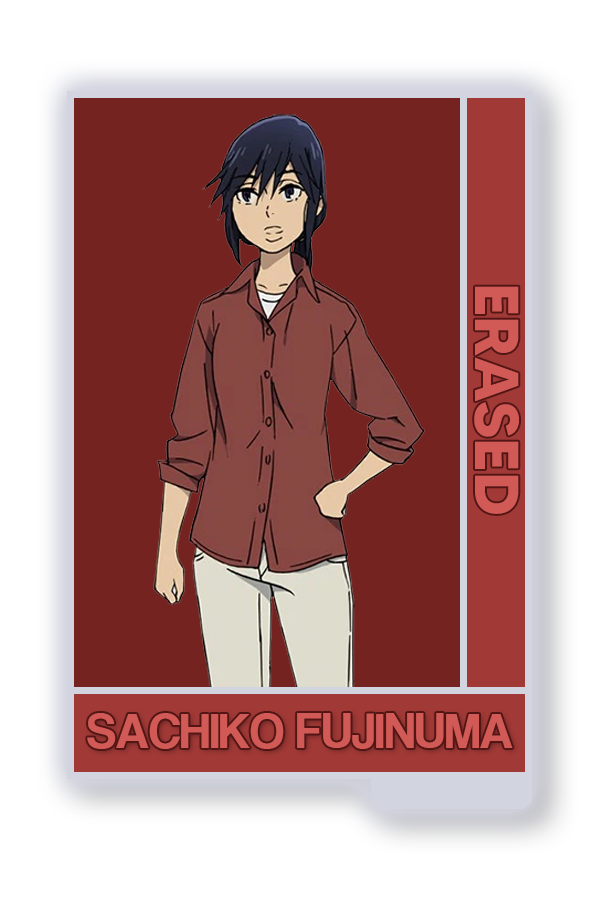
<style>
.page{position:relative;width:600px;height:900px;background:#742320}
.page>*{position:absolute;margin:0}
.t1{font:61.9px "MADETOMMY-Bold";color:#d15a56}
.t2{font:51px "CoolveticaRg-Regular";color:#d15a56}
</style>
<div class="page">
<p class="t1" style="left:474px;top:286px;width:45px;height:228px;rotate:90deg">ERASED</p>
<p class="t2" style="left:87px;top:713px;width:426px;height:36px">SACHIKO FUJINUMA</p>
</div>
